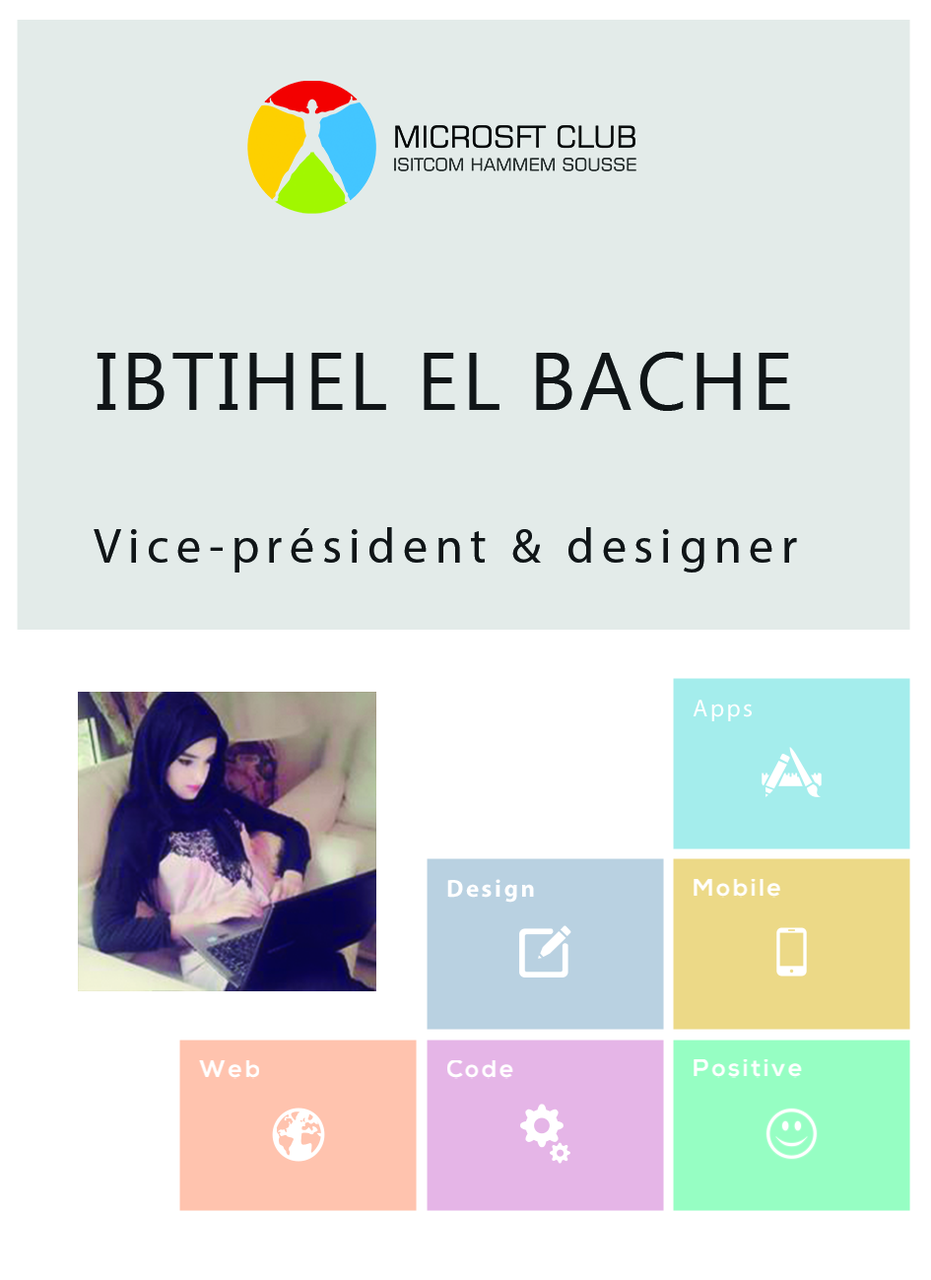
<style>
.page{position:relative;width:931px;height:1280px;background:#e3ebe9}
.page>*{position:absolute;margin:0}
.t1{font:82.1px "SegoeUI";letter-spacing:0.04em;color:#101517;text-transform:uppercase}
.t2{font:49.3px "MyriadPro-Regular";letter-spacing:0.15em;color:#101517}
.t3{font:24.6px "MyriadPro-Regular";letter-spacing:0.1em;color:#ffffff}
.t4{font:24.6px "MyriadPro-Bold";letter-spacing:0.1em;color:#ffffff}
.t5{font:24.6px "NexaBold";letter-spacing:0.1em;color:#ffffff}
</style>
<div class="page">
<p class="t1" style="left:97px;top:352px;width:693px;height:59px">Ibtihel el bache</p>
<p class="t2" style="left:94px;top:527px;width:703px;height:46px">Vice-président &amp; designer</p>
<p class="t3" style="left:693px;top:700px;width:59px;height:21px">Apps</p>
<p class="t4" style="left:447px;top:879px;width:87px;height:24px">Design</p>
<p class="t5" style="left:694px;top:879px;width:88px;height:19px">Mobile</p>
<p class="t5" style="left:199px;top:1060px;width:60px;height:19px">Web</p>
<p class="t5" style="left:447px;top:1060px;width:66px;height:19px">Code</p>
<p class="t5" style="left:694px;top:1060px;width:108px;height:18px">Positive</p>
</div>
